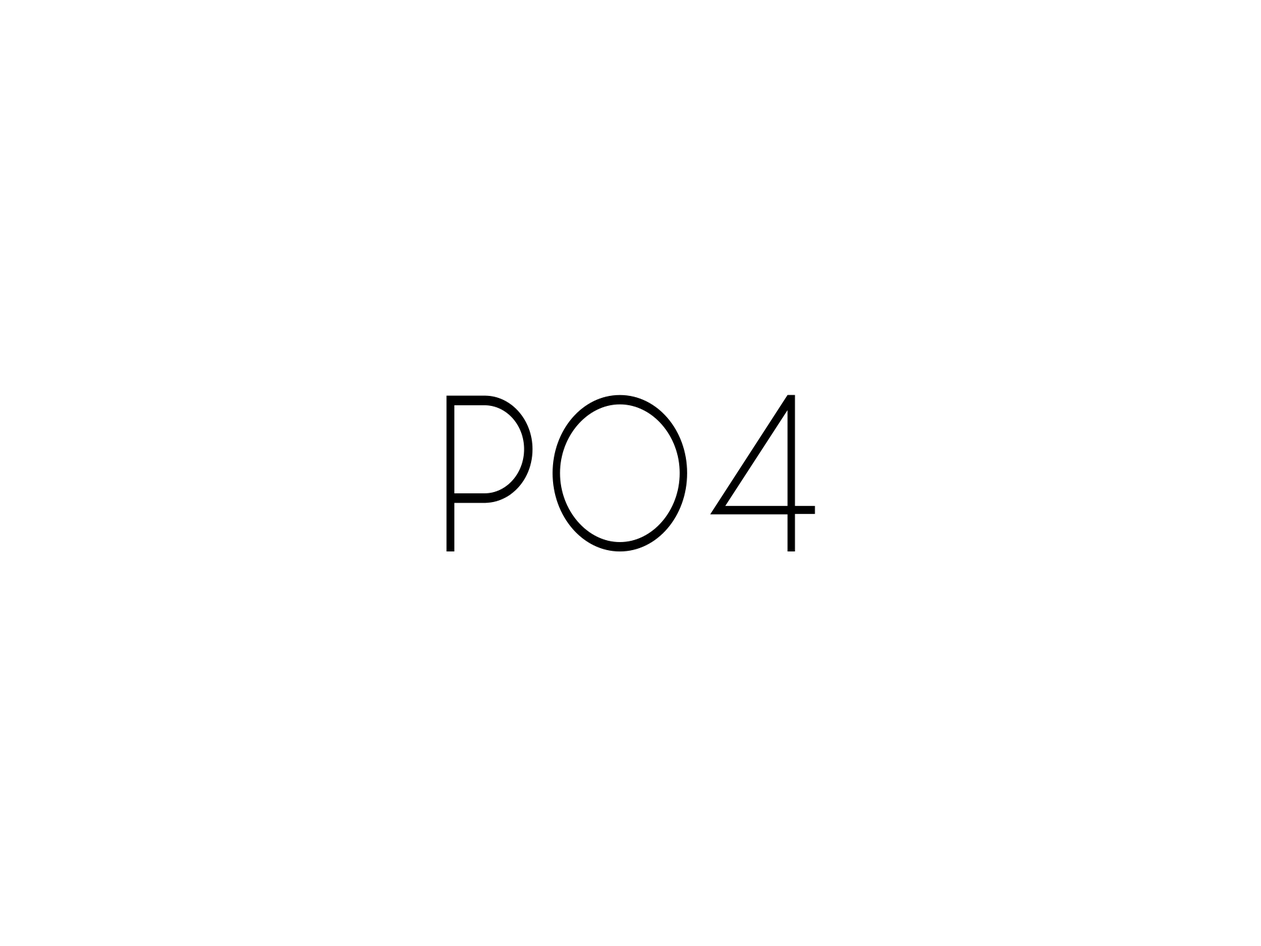
<style>
.page{position:relative;width:1261px;height:946px;background:#ffffff}
.page>*{position:absolute;margin:0}
.t1{font:222.4px "Alcubierre";color:#000000;scale:0.9 1}
</style>
<div class="page">
<p class="t1" style="left:446px;top:394px;width:369px;height:157px">PO4</p>
</div>
